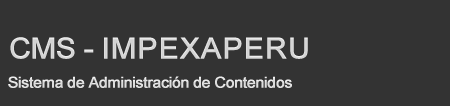
<style>
.page{position:relative;width:450px;height:106px;background:#333333}
.page>*{position:absolute;margin:0}
.t1{font:29px "ArialMT";letter-spacing:0.005em;color:#d8d8d8;font-weight:bold;scale:1.05 1}
.t2{font:29px "ArialMT";letter-spacing:-0.04em;color:#d8d8d8;font-weight:bold;scale:1.05 1}
.t3{font:15px "ArialMT";letter-spacing:-0.04em;color:#dfdfdf;font-weight:bold;scale:1.05 1}
</style>
<div class="page">
<p class="t1" style="left:10px;top:37px;width:298px;height:22px"><span class="t2">CMS - </span>IMPEXAPERU</p>
<p class="t3" style="left:8px;top:76px;width:284px;height:12px">Sistema de Administración de Contenidos</p>
</div>
